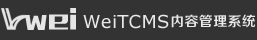
<style>
.page{position:relative;width:257px;height:40px;background:#333333}
.page>*{position:absolute;margin:0}
.t1{font:25px "MFLiHei_Noncommercial-Regular";color:#e6e5e5}
.t2{font:18px "Verdana";letter-spacing:0.019em;color:#e9e9e9}
.t3{font:14px "FZZZHONGJW--GB1-0";letter-spacing:0.019em;color:#e9e9e9}
</style>
<div class="page">
<p class="t1" style="left:25px;top:14px;width:22px;height:16px">w</p>
<p class="t1" style="left:49px;top:8px;width:27px;height:22px">ei</p>
<p class="t2" style="left:83px;top:14px;width:86px;height:15px">WeiTCMS</p>
<p class="t3" style="left:171px;top:14px;width:84px;height:14px">内容管理系统</p>
</div>
